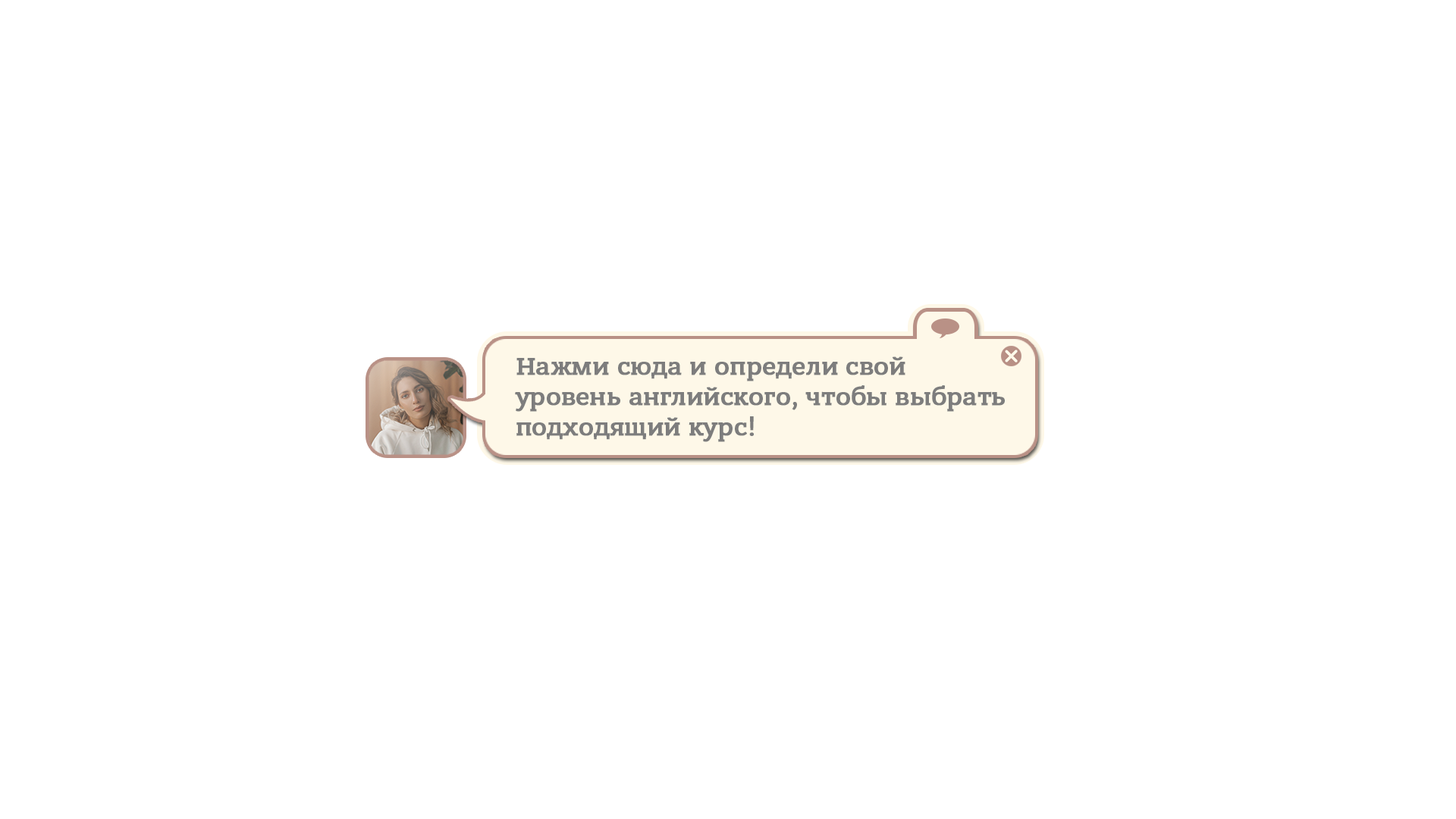
<style>
.page{position:relative;width:1456px;height:819px;background:#ffffff}
.page>*{position:absolute;margin:0}
.t1{font:25.3px "BanderaProMedium";color:#7d7d7d;font-weight:bold}
</style>
<div class="page">
<p class="t1" style="left:515px;top:356px;width:490px;height:86px">Нажми сюда и определи свой <br>уровень английского, чтобы выбрать <br>подходящий курс!</p>
</div>
